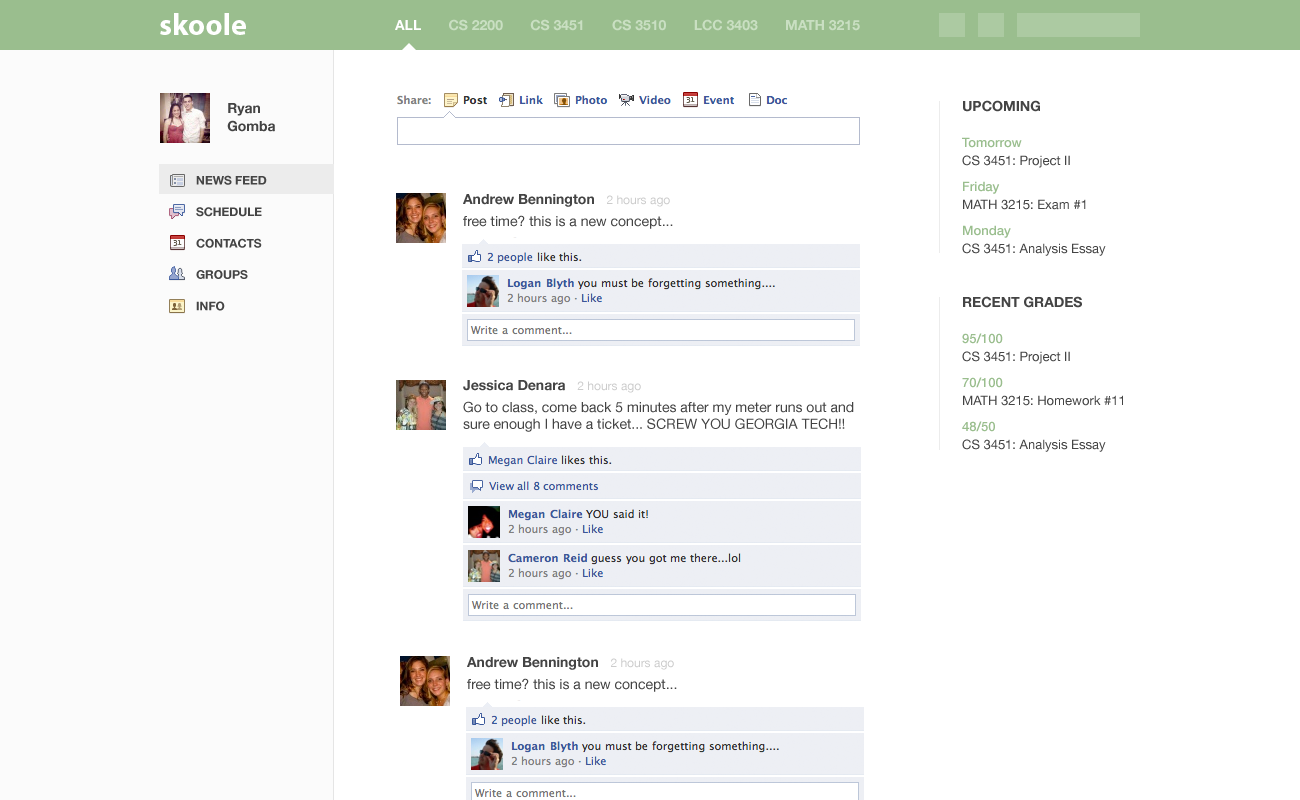
<style>
.page{position:relative;width:1300px;height:800px;background:#ffffff}
.page>*{position:absolute;margin:0}
.t1{font:30px "MyriadPro-Bold";color:#ffffff}
.t2{font:14px "HelveticaNeue-Bold";color:#c9dfc2}
.t3{font:14px "HelveticaNeue-Bold";color:#ffffff}
.t4{font:13px/18px "HelveticaNeue";color:#444444}
.t5{font:14px/18px "HelveticaNeue-Bold";color:#444444}
.t6{font:13px/18px "HelveticaNeue-Medium";color:#9abe8e}
.t7{font:12px/15.7px "HelveticaNeue-Bold";color:#444444}
.t8{font:14px "HelveticaNeue-Bold";color:#444444}
.t9{font:12px/20px "HelveticaNeue-Bold";color:#444444}
.t10{font:14px "HelveticaNeue";color:#444444}
.t11{font:14px/22px "HelveticaNeue-Bold";color:#444444}
.t12{font:12px/22px "HelveticaNeue";color:#cccccc}
.t13{font:14px/22px "HelveticaNeue";color:#444444}
</style>
<div class="page">
<p class="t1" style="left:160px;top:13px;width:86px;height:22px">skoole</p>
<p class="t2" style="left:395px;top:19px;width:465px;height:12px"><span class="t3">ALL       </span>CS 2200       CS 3451       CS 3510       LCC 3403       MATH 3215</p>
<p class="t4" style="left:962px;top:100px;width:161px;height:352px"><span class="t5">UPCOMING<br> <br></span><span class="t6">Tomorrow<br></span>CS 3451: Project II<br> <br><span class="t6">Friday<br></span>MATH 3215: Exam #1<br> <br><span class="t6">Monday<br></span>CS 3451: Analysis Essay<br><br><br><span class="t5">RECENT GRADES<br> <br></span><span class="t6">95/100<br></span>CS 3451: Project II<br> <br><span class="t6">70/100<br></span>MATH 3215: Homework #11<br> <br><span class="t6">48/50<br></span>CS 3451: Analysis Essay</p>
<p class="t7" style="left:196px;top:103px;width:79px;height:208px"><span class="t8">         Ryan <br>         </span><span class="t5">Gomba<br><br><br> </span><span class="t9">NEWS FEED<br></span><br> SCHEDULE<br><br> CONTACTS<br><br> GROUPS<br><br> INFO</p>
<p class="t10" style="left:463px;top:194px;width:391px;height:238px"><span class="t11">Andrew Bennington   </span><span class="t12">2 hours ago<br></span><span class="t13">free time? this is a new concept...<br><br><br><br><br><br><br> <br></span><span class="t11">Jessica Denara   </span><span class="t12">2 hours ago<br></span><span class="t13">Go to</span> class, come back 5 minutes after my meter runs out and<br>sure enough I have a ticket... SCREW YOU GEORGIA TECH!!</p>
</div>
